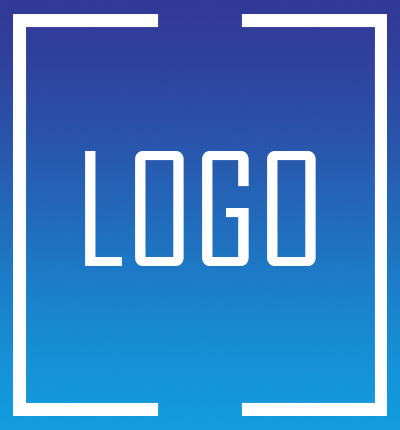
<style>
.page{position:relative;width:400px;height:430px}
.page>*{position:absolute;margin:0}
.t1{font:150px "AgencyFB-Reg";color:#ffffff}
</style>
<div class="page">
<p class="t1" style="left:85px;top:151px;width:231px;height:115px">LOGO</p>
</div>
